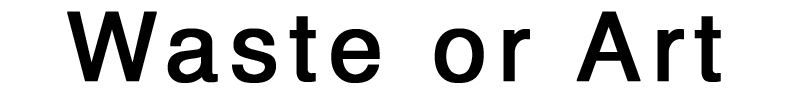
<style>
.page{position:relative;width:800px;height:98px;background:#ffffff}
.page>*{position:absolute;margin:0}
.t1{font:95.5px "Helvetica";letter-spacing:0.1em;color:#000000;font-weight:bold}
</style>
<div class="page">
<p class="t1" style="left:67px;top:11px;width:654px;height:72px">Waste or Art</p>
</div>
